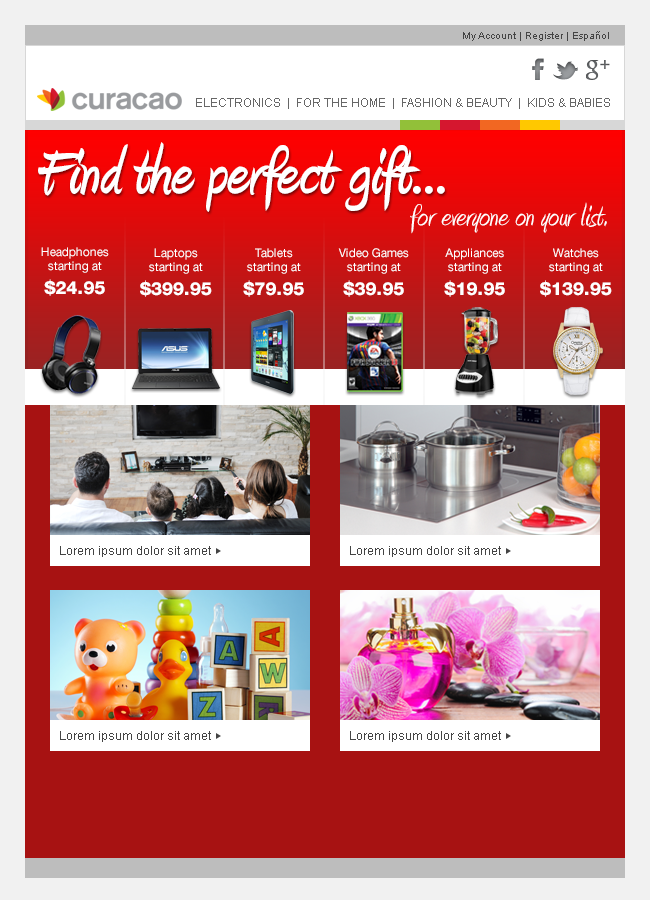
<style>
.page{position:relative;width:650px;height:900px}
.page>*{position:absolute;margin:0}
.t1{font:10px "ArialMT";color:#444444}
.t2{font:12px "ArialMT";color:#666666}
.t3{font:80px "Amienne-Bold";color:#ffffff}
.t4{font:60px "Aparajita-Bold";color:#ffffff}
.t5{font:34px "Amienne";color:#ffffff}
.t6{font:12px/14px "HelveticaNeue-Roman";color:#ffffff}
.t7{font:18px/24px "HelveticaNeue-Heavy";color:#ffffff}
.t8{font:12px "ArialMT";color:#444444}
</style>
<div class="page">
<p class="t1" style="left:463px;top:31px;width:146px;height:10px">My Account | Register | Español</p>
<p class="t2" style="left:196px;top:98px;width:414px;height:11px">ELECTRONICS  |  FOR THE HOME  |  FASHION &amp; BEAUTY  |  KIDS &amp; BABIES</p>
<p class="t3" style="left:38px;top:142px;width:407px;height:70px">Find the perfect gift<span class="t4">...</span></p>
<p class="t5" style="left:410px;top:202px;width:197px;height:32px">for everyone on your list.</p>
<p class="t6" style="left:41px;top:247px;width:68px;height:49px;text-align:center">Headphones<br>starting at<br><span class="t7">$24.95</span></p>
<p class="t6" style="left:140px;top:248px;width:72px;height:49px;text-align:center">Laptops <br>starting at<br><span class="t7">$399.95</span></p>
<p class="t6" style="left:243px;top:248px;width:61px;height:49px;text-align:center">Tablets<br>starting at<br><span class="t7">$79.95</span></p>
<p class="t6" style="left:338px;top:248px;width:71px;height:49px;text-align:center">Video Games<br>starting at<br><span class="t7">$39.95</span></p>
<p class="t6" style="left:444px;top:248px;width:61px;height:49px;text-align:center">Appliances<br>starting at<br><span class="t7">$19.95</span></p>
<p class="t6" style="left:540px;top:248px;width:72px;height:49px;text-align:center">Watches<br>starting at<br><span class="t7">$139.95</span></p>
<p class="t8" style="left:60px;top:546px;width:151px;height:11px">Lorem ipsum dolor sit amet</p>
<p class="t8" style="left:350px;top:546px;width:151px;height:11px">Lorem ipsum dolor sit amet</p>
<p class="t8" style="left:60px;top:731px;width:151px;height:11px">Lorem ipsum dolor sit amet</p>
<p class="t8" style="left:350px;top:731px;width:151px;height:11px">Lorem ipsum dolor sit amet</p>
</div>
